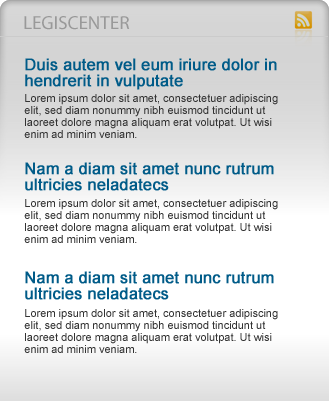
<style>
.page{position:relative;width:329px;height:401px;background:#ffffff}
.page>*{position:absolute;margin:0}
.t1{font:19px "MyriadPro-Regular";color:#999999}
.t2{font:16px/16px "ArialMT";color:#005b88}
.t3{font:11px/12.1px "ArialMT";color:#333333}
.t4{font:16px/16px "ArialMT";color:#005a87}
</style>
<div class="page">
<p class="t1" style="left:24px;top:16px;width:106px;height:14px">LEGISCENTER</p>
<p class="t2" style="left:25px;top:58px;width:252px;height:32px">Duis autem vel eum iriure dolor in <br>hendrerit in vulputate</p>
<p class="t3" style="left:24px;top:94px;width:254px;height:44px">Lorem ipsum dolor sit amet, consectetuer adipiscing <br>elit, sed diam nonummy nibh euismod tincidunt ut <br>laoreet dolore magna aliquam erat volutpat. Ut wisi <br>enim ad minim veniam.</p>
<p class="t4" style="left:25px;top:162px;width:249px;height:29px">Nam a diam sit amet nunc rutrum <br>ultricies neladatecs</p>
<p class="t3" style="left:24px;top:199px;width:254px;height:44px">Lorem ipsum dolor sit amet, consectetuer adipiscing <br>elit, sed diam nonummy nibh euismod tincidunt ut <br>laoreet dolore magna aliquam erat volutpat. Ut wisi <br>enim ad minim veniam.</p>
<p class="t4" style="left:25px;top:271px;width:249px;height:29px">Nam a diam sit amet nunc rutrum <br>ultricies neladatecs</p>
<p class="t3" style="left:24px;top:309px;width:254px;height:44px">Lorem ipsum dolor sit amet, consectetuer adipiscing <br>elit, sed diam nonummy nibh euismod tincidunt ut <br>laoreet dolore magna aliquam erat volutpat. Ut wisi <br>enim ad minim veniam.</p>
</div>
